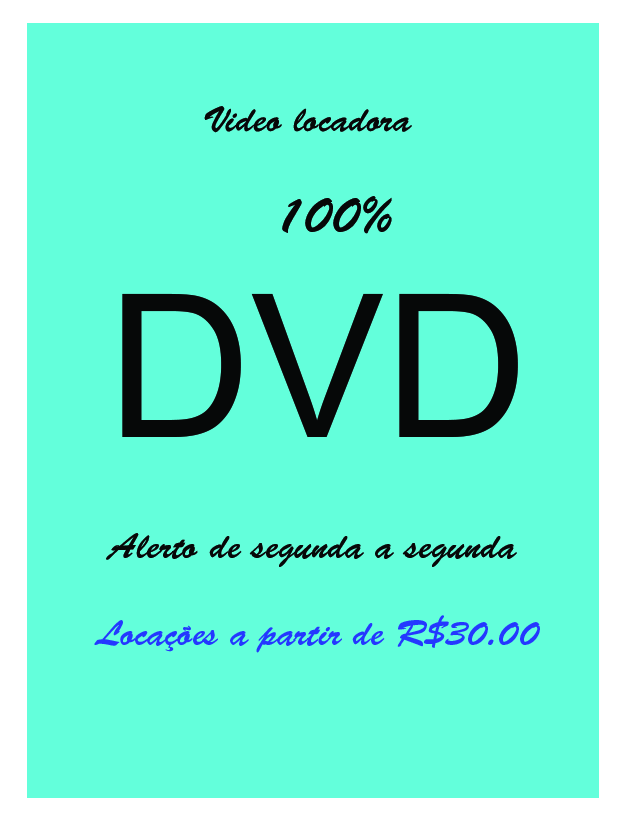
<style>
.page{position:relative;width:624px;height:822px;background:#63ffdb}
.page>*{position:absolute;margin:0}
.t1{font:36px "BrushScriptStd";color:#060808}
.t2{font:50px "BrushScriptStd";color:#060808}
.t3{font:200px "ArialMT";color:#060808}
.t4{font:36px "BrushScriptStd";color:#2438ff}
</style>
<div class="page">
<p class="t1" style="left:204px;top:106px;width:208px;height:27px">Video locadora</p>
<p class="t2" style="left:282px;top:196px;width:110px;height:38px">100%</p>
<p class="t3" style="left:122px;top:293px;width:396px;height:144px">DVD</p>
<p class="t1" style="left:106px;top:533px;width:411px;height:34px">Alerto de segunda a segunda</p>
<p class="t4" style="left:94px;top:615px;width:446px;height:38px">Locações a partir de R$30.00</p>
</div>
